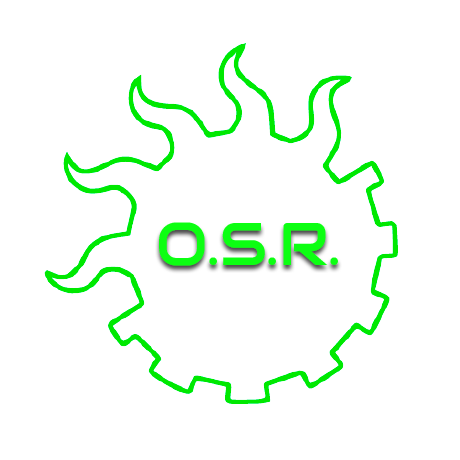
<style>
.page{position:relative;width:460px;height:460px;background:#ffffff}
.page>*{position:absolute;margin:0}
.t1{font:60px "Audiowide-Regular";color:#0cff12}
</style>
<div class="page">
<p class="t1" style="left:159px;top:222px;width:179px;height:44px">O.S.R.</p>
</div>
